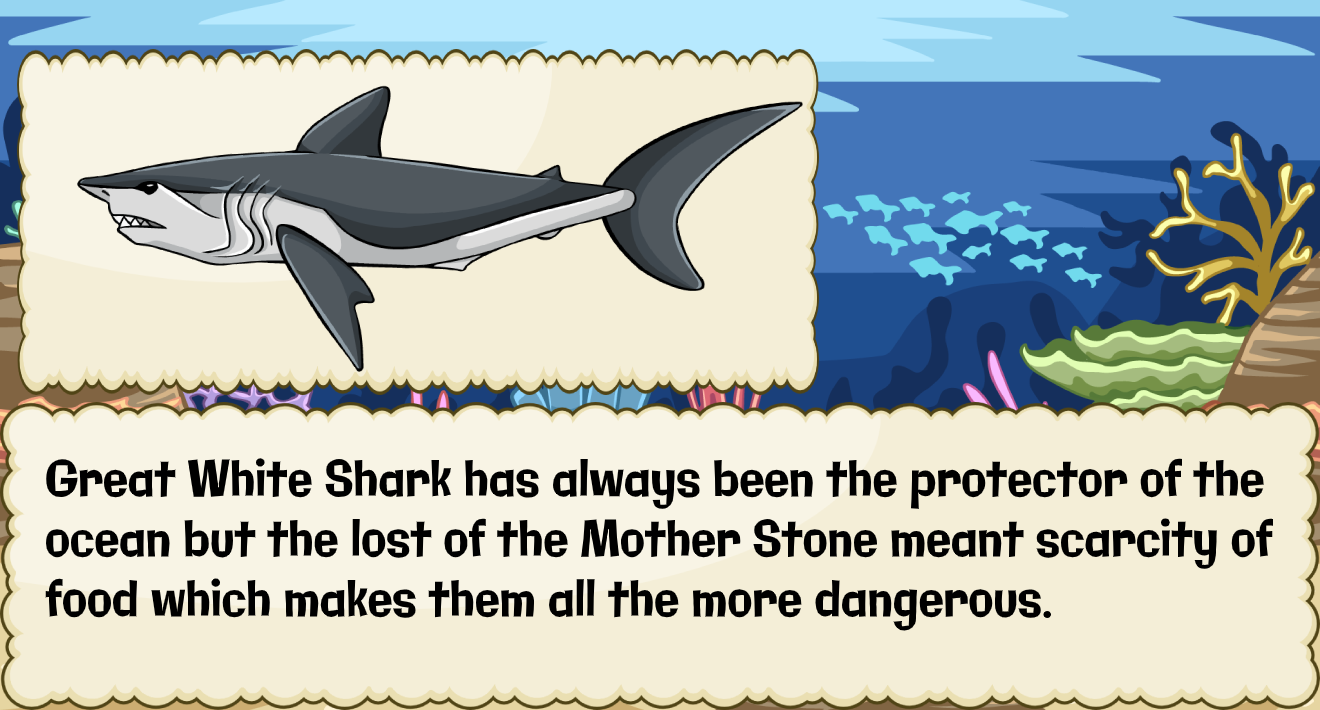
<style>
.page{position:relative;width:1320px;height:710px;background:#f4eed7}
.page>*{position:absolute;margin:0}
.t1{font:50.1px "Galindo-Regular";color:#000000;scale:0.82 1}
</style>
<div class="page">
<p class="t1" style="left:45px;top:458px;width:1229px;height:173px">Great White Shark has always been the protector of the <br>ocean but the lost of the Mother Stone meant scarcity of <br>food which makes them all the more dangerous.</p>
</div>
